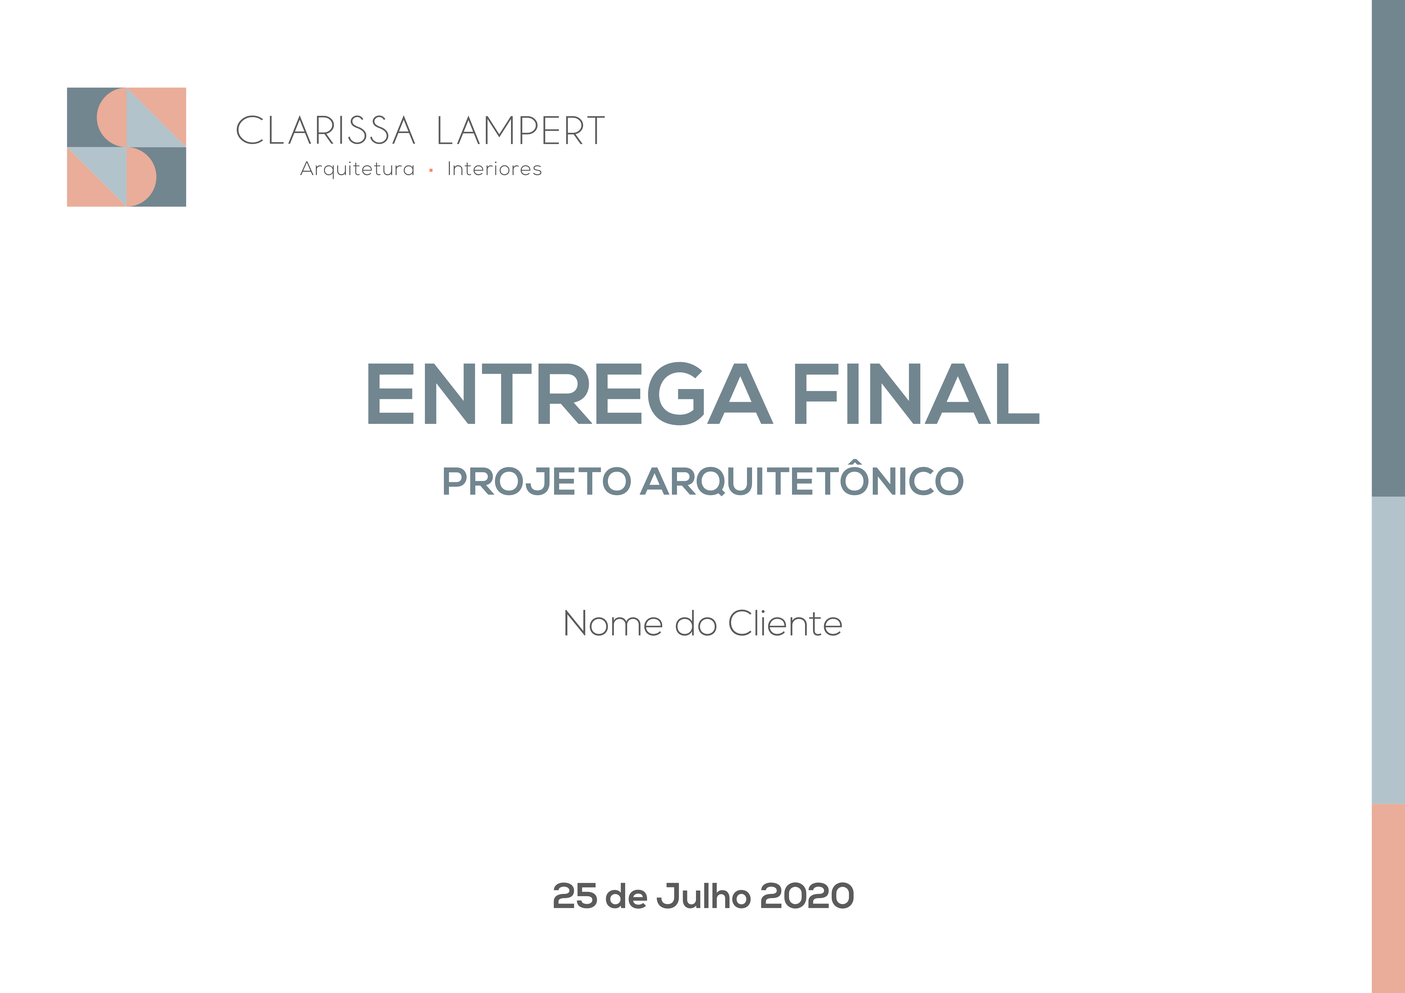
<style>
.page{position:relative;width:1405px;height:993px;background:#ffffff}
.page>*{position:absolute;margin:0}
.t1{font:20.7px "NexaBold";color:#728690}
.t2{font:9.3px "NexaBold";color:#728690}
.t3{font:8.7px "NexaLight";color:#5b5b5b}
.t4{font:8.6px "NexaBold";color:#5b5b5b}
</style>
<div class="page">
<p class="t1" style="left:368px;top:362px;width:671px;height:63px;text-align:justify">ENTREGA FINAL</p>
<p class="t2" style="left:444px;top:459px;width:519px;height:38px;text-align:justify">PROJETO ARQUITETÔNICO</p>
<p class="t3" style="left:565px;top:610px;width:277px;height:26px;text-align:justify">Nome do Cliente</p>
<p class="t4" style="left:554px;top:883px;width:300px;height:26px;text-align:justify">25 de Julho 2020</p>
</div>
